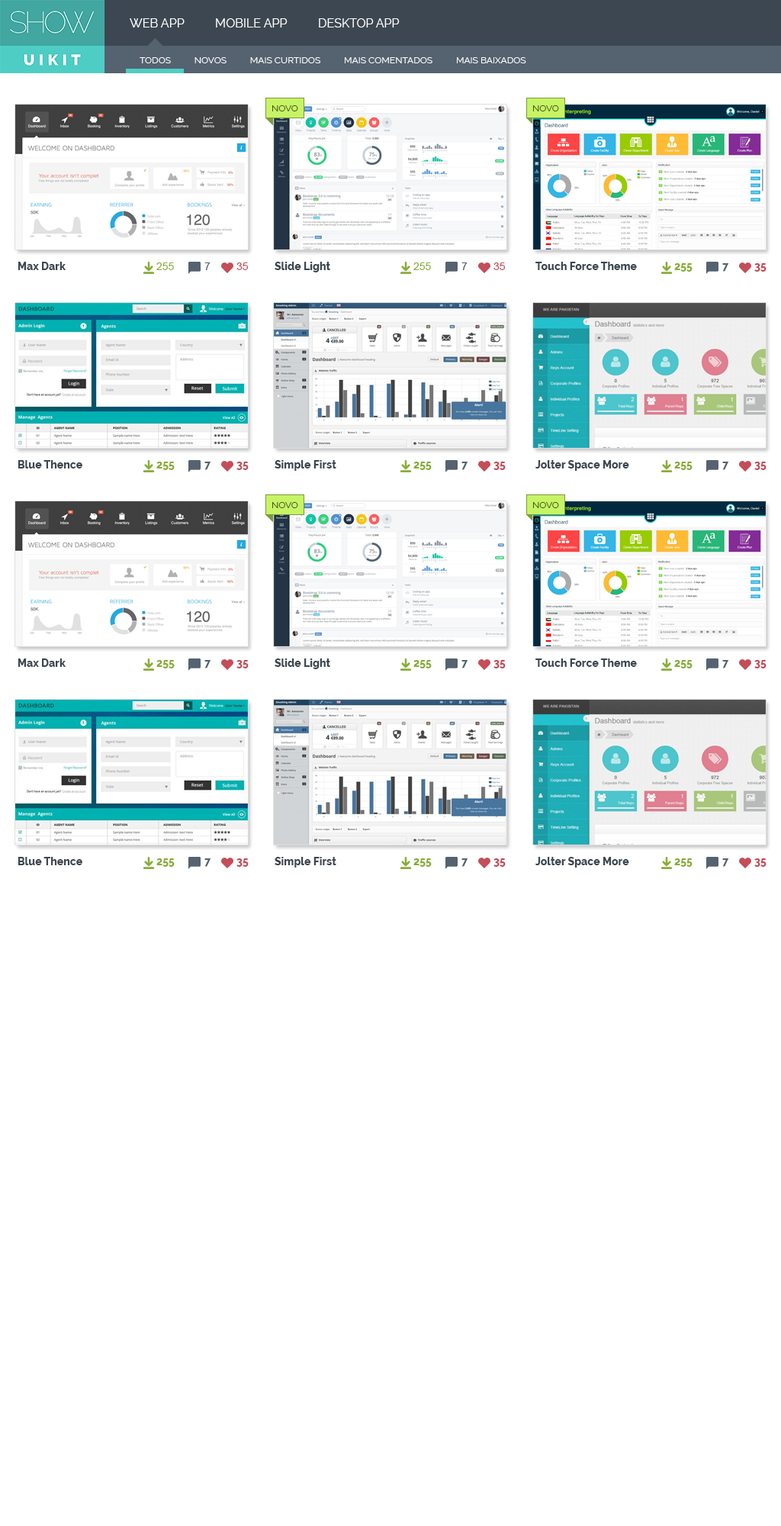
<style>
.page{position:relative;width:781px;height:1526px;background:#ffffff}
.page>*{position:absolute;margin:0}
.t1{font:12.2px "Raleway";color:#ffffff}
.t2{font:9.2px "Raleway";color:#ffffff}
.t3{font:9.2px "Raleway";color:#445322}
.t4{font:10.7px "Raleway-ExtraBold";color:#3c4751}
.t5{font:10.7px "ArialMT";color:#87ac37}
.t6{font:10.7px "ArialMT";color:#556270}
.t7{font:10.7px "ArialMT";color:#c44d58}
.t8{font:10.7px "Raleway-ExtraBold";color:#87ac37}
.t9{font:10.7px "Raleway-ExtraBold";color:#556270}
.t10{font:10.7px "Raleway-ExtraBold";color:#c44d58}
</style>
<div class="page">
<p class="t1" style="left:130px;top:18px;width:270px;height:9px">WEB APP          MOBILE APP          DESKTOP APP</p>
<p class="t2" style="left:140px;top:57px;width:387px;height:6px">TODOS          NOVOS          MAIS CURTIDOS          MAIS COMENTADOS          MAIS BAIXADOS</p>
<p class="t3" style="left:272px;top:105px;width:26px;height:6px">NOVO</p>
<p class="t3" style="left:533px;top:105px;width:26px;height:6px">NOVO</p>
<p class="t4" style="left:18px;top:262px;width:48px;height:8px">Max Dark</p>
<p class="t5" style="left:156px;top:262px;width:18px;height:8px">255</p>
<p class="t6" style="left:204px;top:262px;width:7px;height:8px">7</p>
<p class="t7" style="left:237px;top:262px;width:11px;height:8px">35</p>
<p class="t4" style="left:275px;top:262px;width:55px;height:10px">Slide Light</p>
<p class="t5" style="left:414px;top:262px;width:17px;height:8px">255</p>
<p class="t6" style="left:462px;top:262px;width:6px;height:8px">7</p>
<p class="t7" style="left:494px;top:262px;width:11px;height:8px">35</p>
<p class="t4" style="left:536px;top:262px;width:101px;height:8px">Touch Force Theme</p>
<p class="t8" style="left:675px;top:263px;width:18px;height:9px">255</p>
<p class="t9" style="left:723px;top:263px;width:6px;height:9px">7</p>
<p class="t10" style="left:755px;top:263px;width:12px;height:9px">35</p>
<p class="t4" style="left:18px;top:460px;width:64px;height:9px">Blue Thence</p>
<p class="t8" style="left:156px;top:462px;width:19px;height:8px">255</p>
<p class="t9" style="left:204px;top:462px;width:7px;height:8px">7</p>
<p class="t10" style="left:237px;top:462px;width:12px;height:8px">35</p>
<p class="t4" style="left:275px;top:460px;width:62px;height:11px">Simple First</p>
<p class="t8" style="left:414px;top:462px;width:18px;height:8px">255</p>
<p class="t9" style="left:462px;top:462px;width:7px;height:8px">7</p>
<p class="t10" style="left:494px;top:462px;width:12px;height:8px">35</p>
<p class="t4" style="left:536px;top:460px;width:94px;height:11px">Jolter Space More</p>
<p class="t8" style="left:675px;top:462px;width:18px;height:8px">255</p>
<p class="t9" style="left:723px;top:462px;width:6px;height:8px">7</p>
<p class="t10" style="left:755px;top:462px;width:12px;height:8px">35</p>
<p class="t3" style="left:272px;top:502px;width:26px;height:6px">NOVO</p>
<p class="t3" style="left:533px;top:502px;width:26px;height:6px">NOVO</p>
<p class="t4" style="left:18px;top:659px;width:48px;height:8px">Max Dark</p>
<p class="t8" style="left:156px;top:660px;width:19px;height:8px">255</p>
<p class="t9" style="left:204px;top:660px;width:7px;height:8px">7</p>
<p class="t10" style="left:237px;top:660px;width:12px;height:8px">35</p>
<p class="t4" style="left:275px;top:659px;width:55px;height:10px">Slide Light</p>
<p class="t8" style="left:414px;top:660px;width:18px;height:8px">255</p>
<p class="t9" style="left:462px;top:660px;width:7px;height:8px">7</p>
<p class="t10" style="left:494px;top:660px;width:12px;height:8px">35</p>
<p class="t4" style="left:536px;top:659px;width:101px;height:8px">Touch Force Theme</p>
<p class="t8" style="left:675px;top:660px;width:18px;height:8px">255</p>
<p class="t9" style="left:723px;top:660px;width:6px;height:8px">7</p>
<p class="t10" style="left:755px;top:660px;width:12px;height:8px">35</p>
<p class="t4" style="left:18px;top:857px;width:64px;height:8px">Blue Thence</p>
<p class="t4" style="left:275px;top:857px;width:62px;height:11px">Simple First</p>
<p class="t4" style="left:536px;top:857px;width:94px;height:11px">Jolter Space More</p>
<p class="t8" style="left:156px;top:858px;width:19px;height:9px">255</p>
<p class="t9" style="left:204px;top:858px;width:7px;height:9px">7</p>
<p class="t10" style="left:237px;top:858px;width:12px;height:9px">35</p>
<p class="t8" style="left:414px;top:858px;width:18px;height:9px">255</p>
<p class="t9" style="left:462px;top:858px;width:7px;height:9px">7</p>
<p class="t10" style="left:494px;top:858px;width:12px;height:9px">35</p>
<p class="t8" style="left:675px;top:858px;width:18px;height:9px">255</p>
<p class="t9" style="left:723px;top:858px;width:6px;height:9px">7</p>
<p class="t10" style="left:755px;top:858px;width:12px;height:9px">35</p>
</div>
